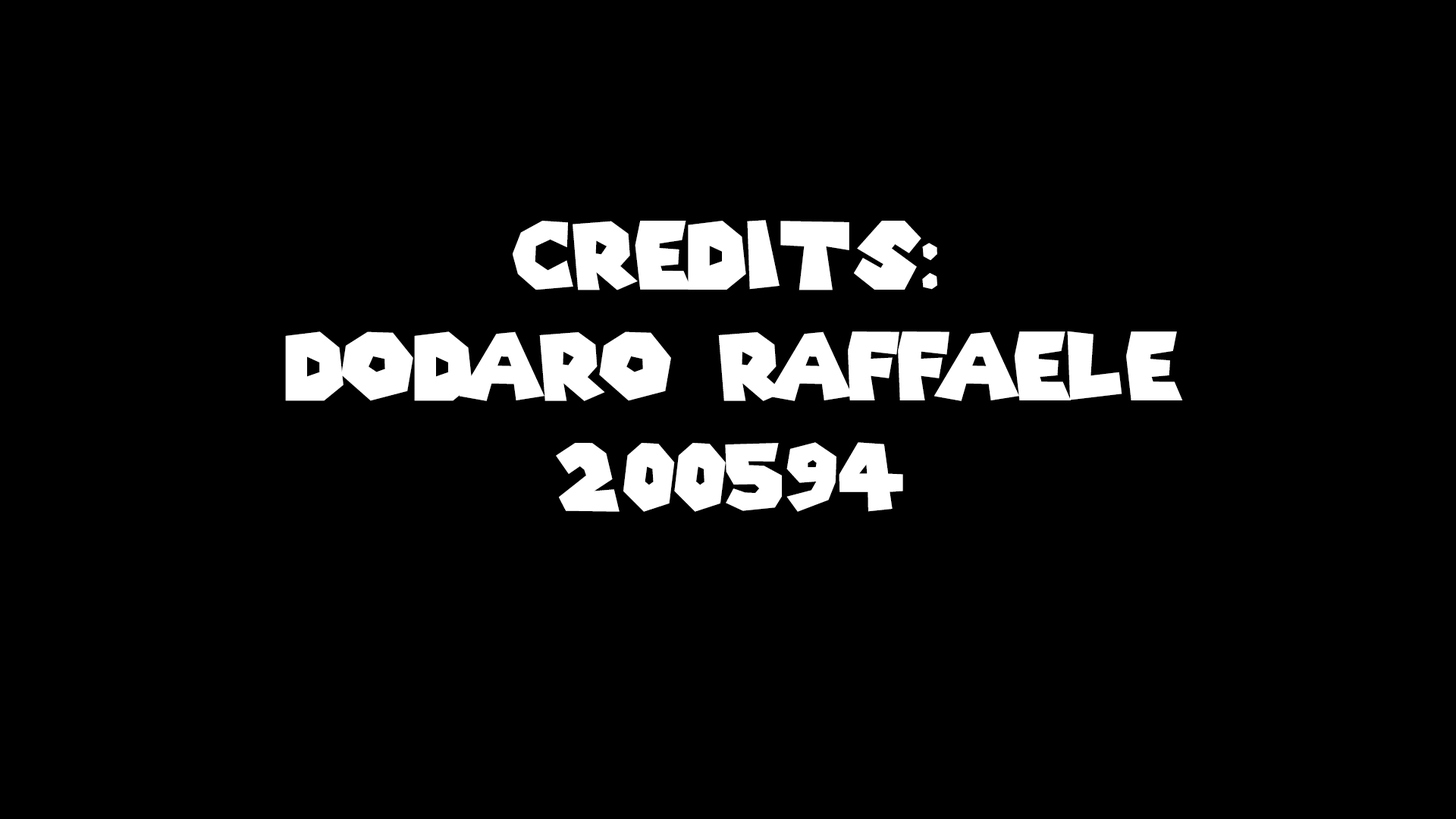
<style>
.page{position:relative;width:1456px;height:819px;background:#000000}
.page>*{position:absolute;margin:0}
.t1{font:92.5px "SuperMarioGalaxy";color:#ffffff}
</style>
<div class="page">
<p class="t1" style="left:285px;top:220px;width:898px;height:292px;text-align:center">credits:<br>dodaro raffaele<br>200594</p>
</div>
